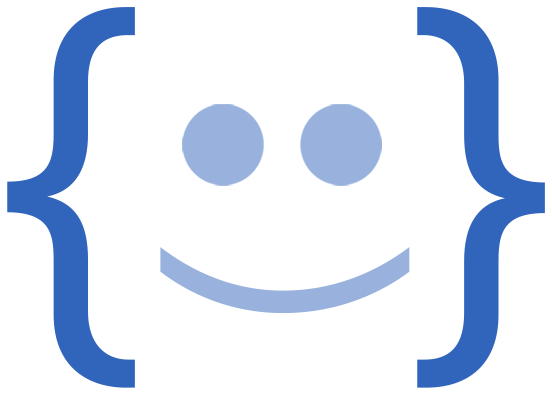
<style>
.page{position:relative;width:552px;height:395px;background:#ffffff}
.page>*{position:absolute;margin:0}
.t1{font:419.4px "AcuminConcept-Regular";color:#3165bc}
.t2{font:274.7px "AcuminConcept-Regular";color:#98b2dd}
</style>
<div class="page">
<p class="t1" style="left:7px;top:7px;width:538px;height:381px">{   }</p>
<p class="t2" style="left:160px;top:247px;width:250px;height:67px;rotate:-90deg">(</p>
</div>
